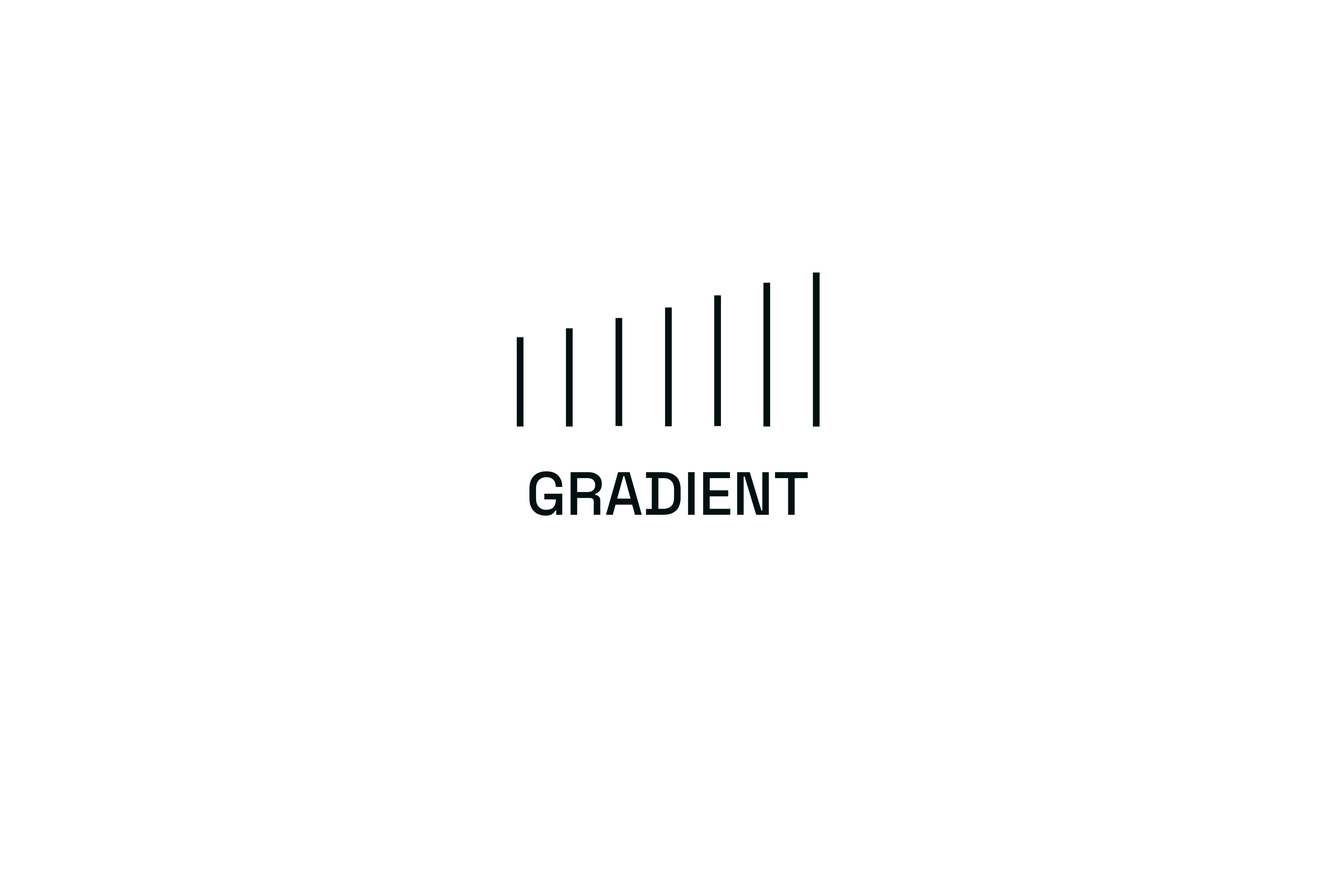
<style>
.page{position:relative;width:1337px;height:892px;background:#ffffff}
.page>*{position:absolute;margin:0}
.t1{font:60.9px "SpaceGroteskLight-Medium";color:#011111}
</style>
<div class="page">
<p class="t1" style="left:529px;top:471px;width:279px;height:45px">GRADIENT</p>
</div>
